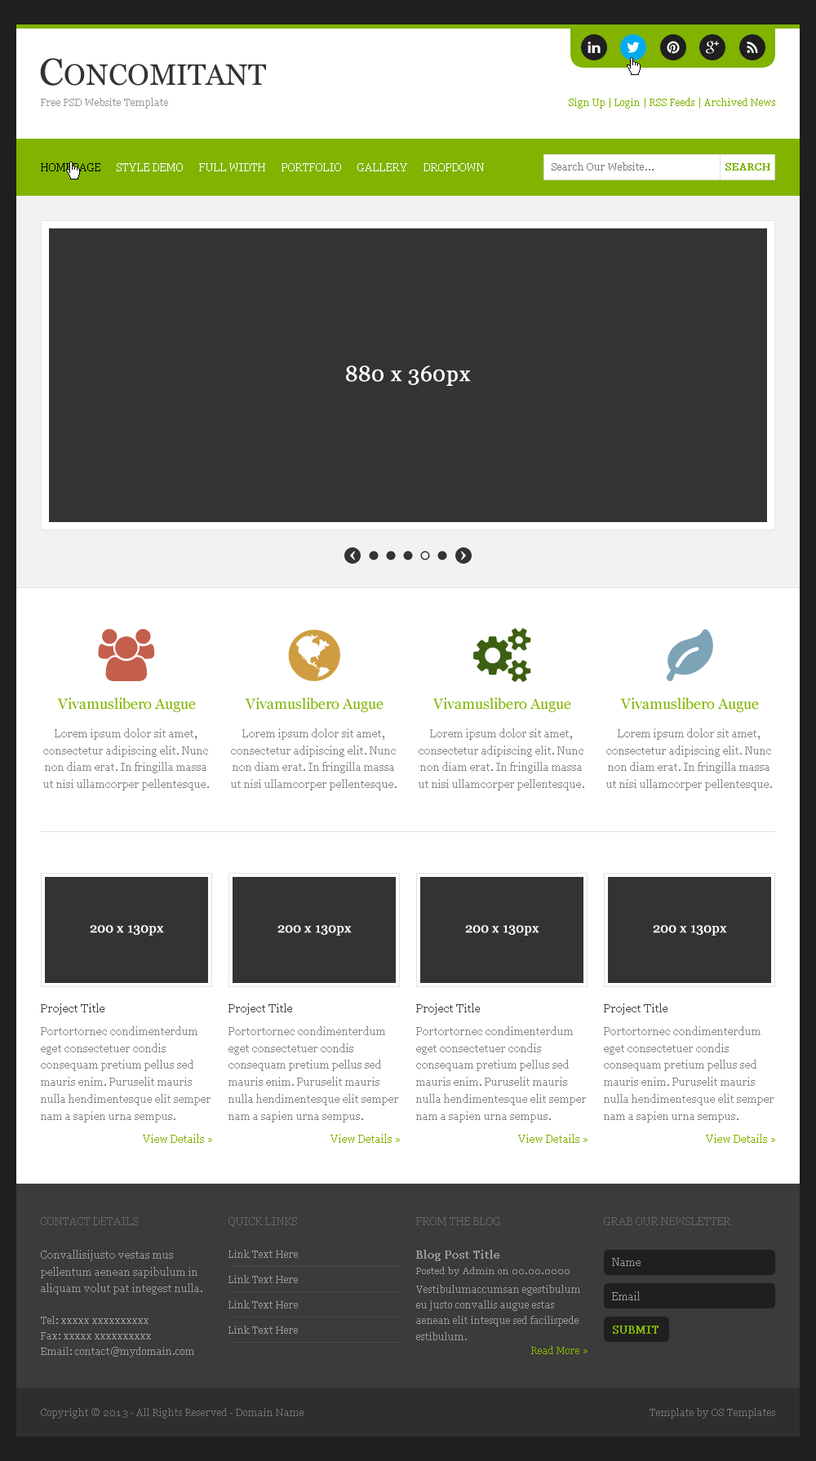
<style>
.page{position:relative;width:816px;height:1461px;background:#ffffff}
.page>*{position:absolute;margin:0}
.t1{font:29.4px "Georgia";color:#333333}
.t2{font:37.5px "Georgia";color:#333333}
.t3{font:9.8px "Georgia";color:#999999}
.t4{font:9.8px "Georgia";color:#81b300}
.t5{font:10.6px "Georgia";color:#000000}
.t6{font:10.6px "Georgia";color:#ffffff}
.t7{font:9.8px "Georgia";color:#7f7f7f}
.t8{font:9.8px "Georgia";color:#81b300;font-weight:bold}
.t9{font:21.2px "Georgia";color:#ffffff;font-weight:bold}
.t10{font:14.7px "Georgia";color:#81b300}
.t11{font:10.6px/17px "Georgia";color:#888888}
.t12{font:13.1px "Georgia";color:#ffffff;font-weight:bold}
.t13{font:11.4px "Georgia";color:#444444}
.t14{font:10.6px/17px "Georgia";color:#878787}
.t15{font:10.6px "Georgia";color:#81b300}
.t16{font:10.6px "Georgia";color:#666666}
.t17{font:10.6px/17px "Georgia";color:#999999}
.t18{font:9.8px/15.7px "Georgia";color:#999999}
.t19{font:10.6px "Georgia";color:#999999;font-weight:bold}
.t20{font:10.6px "Georgia";color:#999999}
.t21{font:9px "Georgia";color:#999999}
.t22{font:10.6px "Georgia";color:#81b300;font-weight:bold}
.t23{font:9.8px "Georgia";color:#737373}
</style>
<div class="page">
<p class="t1" style="left:40px;top:58px;width:226px;height:28px"><span class="t2">C</span>ONCOMITANT</p>
<p class="t3" style="left:41px;top:98px;width:127px;height:11px">Free PSD Website Template</p>
<p class="t4" style="left:569px;top:98px;width:206px;height:11px">Sign Up | Login | RSS Feeds | Archived News</p>
<p class="t5" style="left:41px;top:163px;width:59px;height:8px">HOMEPAGE</p>
<p class="t6" style="left:117px;top:163px;width:66px;height:8px">STYLE DEMO</p>
<p class="t6" style="left:199px;top:163px;width:66px;height:8px">FULL WIDTH</p>
<p class="t6" style="left:282px;top:163px;width:59px;height:8px">PORTFOLIO</p>
<p class="t6" style="left:357px;top:163px;width:50px;height:8px">GALLERY</p>
<p class="t6" style="left:423px;top:163px;width:61px;height:8px">DROPDOWN</p>
<p class="t7" style="left:552px;top:162px;width:102px;height:9px">Search Our Website...</p>
<p class="t8" style="left:725px;top:163px;width:45px;height:8px">SEARCH</p>
<p class="t9" style="left:346px;top:366px;width:125px;height:20px">880 x 360px</p>
<p class="t10" style="left:57px;top:698px;width:139px;height:14px">Vivamuslibero Augue</p>
<p class="t10" style="left:245px;top:698px;width:139px;height:14px">Vivamuslibero Augue</p>
<p class="t10" style="left:432px;top:698px;width:139px;height:14px">Vivamuslibero Augue</p>
<p class="t10" style="left:620px;top:698px;width:139px;height:14px">Vivamuslibero Augue</p>
<p class="t11" style="left:43px;top:729px;width:166px;height:62px;text-align:center">Lorem ipsum dolor sit amet, consectetur adipiscing elit. Nunc non diam erat. In fringilla massa ut nisi ullamcorper pellentesque.</p>
<p class="t11" style="left:231px;top:729px;width:166px;height:62px;text-align:center">Lorem ipsum dolor sit amet, consectetur adipiscing elit. Nunc non diam erat. In fringilla massa ut nisi ullamcorper pellentesque.</p>
<p class="t11" style="left:419px;top:729px;width:165px;height:62px;text-align:center">Lorem ipsum dolor sit amet, consectetur adipiscing elit. Nunc non diam erat. In fringilla massa ut nisi ullamcorper pellentesque.</p>
<p class="t11" style="left:606px;top:729px;width:166px;height:62px;text-align:center">Lorem ipsum dolor sit amet, consectetur adipiscing elit. Nunc non diam erat. In fringilla massa ut nisi ullamcorper pellentesque.</p>
<p class="t12" style="left:90px;top:925px;width:74px;height:11px">200 x 130px</p>
<p class="t12" style="left:277px;top:925px;width:75px;height:11px">200 x 130px</p>
<p class="t12" style="left:465px;top:925px;width:74px;height:11px">200 x 130px</p>
<p class="t12" style="left:653px;top:925px;width:74px;height:11px">200 x 130px</p>
<p class="t13" style="left:41px;top:1004px;width:63px;height:11px">Project Title</p>
<p class="t13" style="left:228px;top:1004px;width:64px;height:11px">Project Title</p>
<p class="t13" style="left:416px;top:1004px;width:64px;height:11px">Project Title</p>
<p class="t13" style="left:604px;top:1004px;width:63px;height:11px">Project Title</p>
<p class="t14" style="left:41px;top:1026px;width:170px;height:97px">Portortornec condimenterdum eget consectetuer condis consequam pretium pellus sed mauris enim. Puruselit mauris nulla hendimentesque elit semper nam a sapien urna sempus.</p>
<p class="t14" style="left:228px;top:1026px;width:170px;height:97px">Portortornec condimenterdum eget consectetuer condis consequam pretium pellus sed mauris enim. Puruselit mauris nulla hendimentesque elit semper nam a sapien urna sempus.</p>
<p class="t14" style="left:416px;top:1026px;width:170px;height:97px">Portortornec condimenterdum eget consectetuer condis consequam pretium pellus sed mauris enim. Puruselit mauris nulla hendimentesque elit semper nam a sapien urna sempus.</p>
<p class="t14" style="left:604px;top:1026px;width:170px;height:97px">Portortornec condimenterdum eget consectetuer condis consequam pretium pellus sed mauris enim. Puruselit mauris nulla hendimentesque elit semper nam a sapien urna sempus.</p>
<p class="t15" style="left:143px;top:1134px;width:69px;height:9px">View Details »</p>
<p class="t15" style="left:330px;top:1134px;width:70px;height:9px">View Details »</p>
<p class="t15" style="left:518px;top:1134px;width:69px;height:9px">View Details »</p>
<p class="t15" style="left:706px;top:1134px;width:69px;height:9px">View Details »</p>
<p class="t16" style="left:41px;top:1217px;width:97px;height:9px">CONTACT DETAILS</p>
<p class="t16" style="left:228px;top:1217px;width:69px;height:10px">QUICK LINKS</p>
<p class="t16" style="left:416px;top:1217px;width:84px;height:9px">FROM THE BLOG</p>
<p class="t16" style="left:604px;top:1217px;width:127px;height:9px">GRAB OUR NEWSLETTER</p>
<p class="t17" style="left:41px;top:1250px;width:161px;height:108px">Convallisijusto vestas mus pellentum aenean sapibulum in aliquam volut pat integest nulla. <br><span class="t18"><br>Tel: xxxxx xxxxxxxxxx<br>Fax: xxxxx xxxxxxxxxx<br>Email: contact@mydomain.com</span></p>
<p class="t3" style="left:228px;top:1250px;width:70px;height:8px">Link Text Here</p>
<p class="t19" style="left:416px;top:1250px;width:83px;height:11px">Blog Post Title</p>
<p class="t20" style="left:612px;top:1258px;width:29px;height:8px">Name</p>
<p class="t3" style="left:228px;top:1275px;width:70px;height:9px">Link Text Here</p>
<p class="t21" style="left:416px;top:1267px;width:154px;height:9px">Posted by Admin on 00.00.0000</p>
<p class="t18" style="left:416px;top:1285px;width:164px;height:56px">Vestibulumaccumsan egestibulum eu justo convallis augue estas aenean elit intesque sed facilispede estibulum.</p>
<p class="t3" style="left:228px;top:1301px;width:70px;height:8px">Link Text Here</p>
<p class="t20" style="left:612px;top:1292px;width:28px;height:9px">Email</p>
<p class="t3" style="left:228px;top:1326px;width:70px;height:8px">Link Text Here</p>
<p class="t22" style="left:613px;top:1326px;width:45px;height:8px">SUBMIT</p>
<p class="t4" style="left:531px;top:1346px;width:56px;height:8px">Read More »</p>
<p class="t23" style="left:41px;top:1408px;width:263px;height:11px">Copyright © 2013 - All Rights Reserved - Domain Name</p>
<p class="t23" style="left:650px;top:1408px;width:125px;height:11px">Template by OS Templates</p>
</div>
